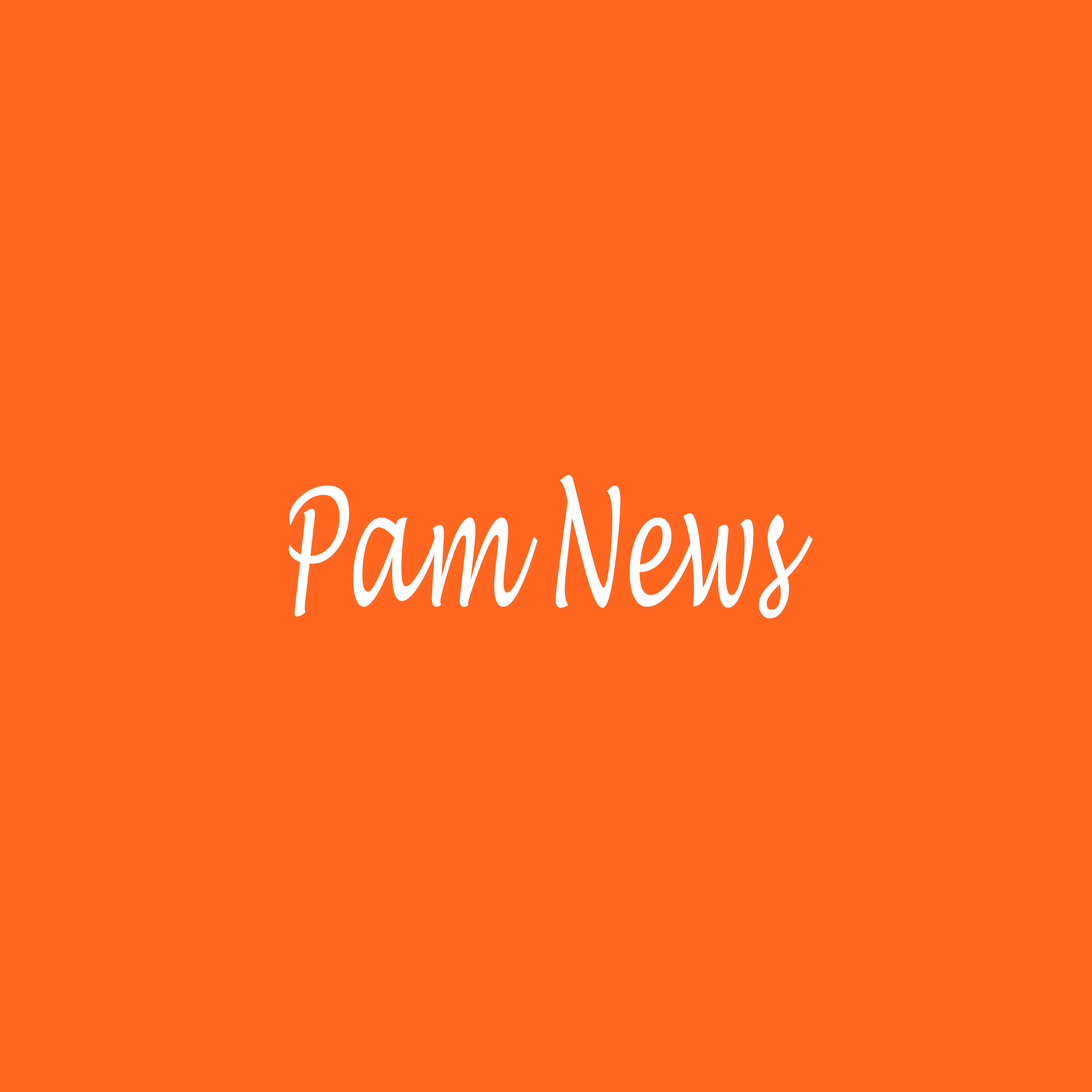
<style>
.page{position:relative;width:1092px;height:1092px;background:#ff6721}
.page>*{position:absolute;margin:0}
.t1{font:160.8px "LucidaHandwriting-Italic";color:#ffffff;scale:0.57 1}
</style>
<div class="page">
<p class="t1" style="left:289px;top:475px;width:524px;height:144px">Pam News</p>
</div>
